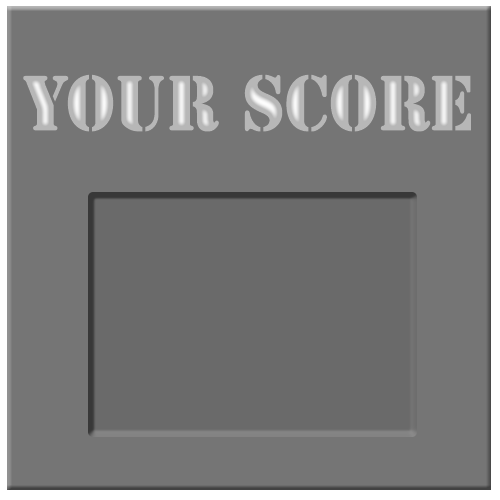
<style>
.page{position:relative;width:500px;height:500px;background:#757575}
.page>*{position:absolute;margin:0}
.t1{font:72.7px "StencilStd";color:#b7b7b7;scale:0.93 1}
</style>
<div class="page">
<p class="t1" style="left:23px;top:74px;width:448px;height:58px">YOUR SCORE</p>
<p class="t1" style="left:23px;top:74px;width:448px;height:58px">YOUR SCORE</p>
</div>
